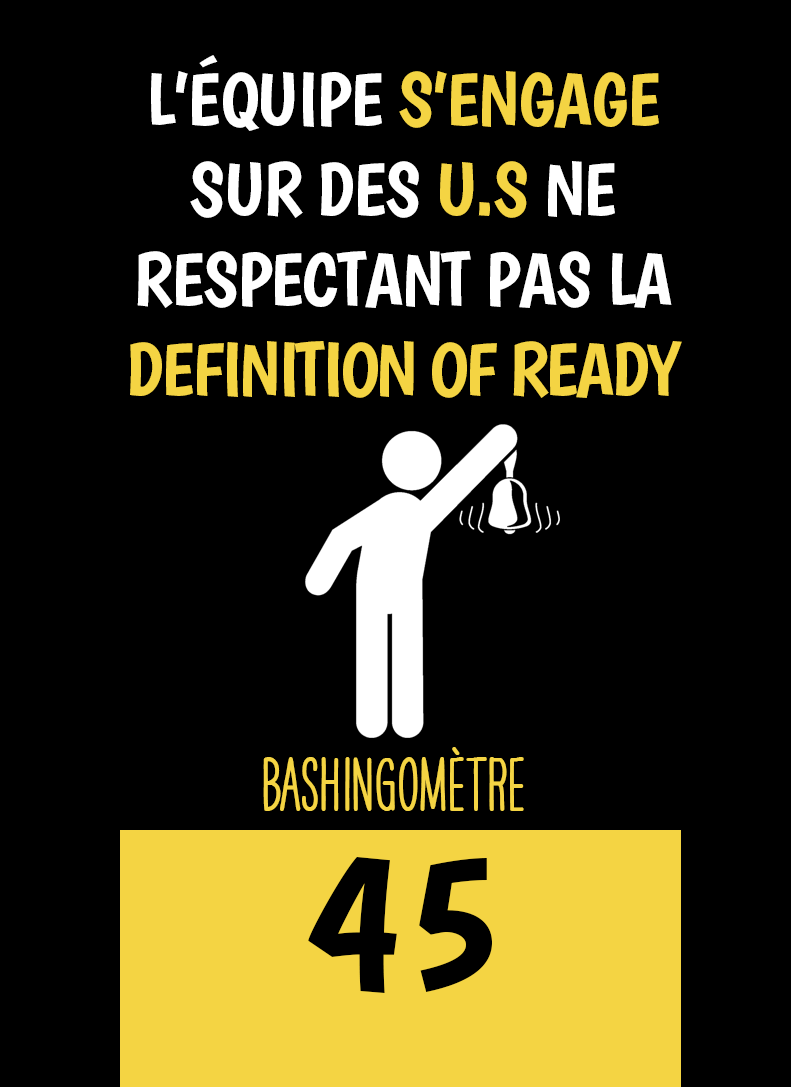
<style>
.page{position:relative;width:791px;height:1087px;background:#000000}
.page>*{position:absolute;margin:0}
.t1{font:75px "Boogaloo-Regular";letter-spacing:-0.02em;color:#ffffff}
.t2{font:75px "Boogaloo-Regular";letter-spacing:-0.02em;color:#f4d443}
.t3{font:75px "Boogaloo-Regular";letter-spacing:-0.04em;color:#f4d443}
.t4{font:66.7px "HAVEANICEDAYTallW04-Bold";color:#f4d443}
.t5{font:200px "Boogaloo-Regular";color:#000000}
</style>
<div class="page">
<p class="t1" style="left:130px;top:55px;width:552px;height:343px;text-align:center">L’ÉQUIPE <span class="t2">S’ENGAGE<br></span>SUR DES <span class="t2">U.S</span> NE RESPECTANT PAS LA<br><span class="t3">DEFINITION OF READY</span></p>
<p class="t4" style="left:263px;top:747px;width:261px;height:64px">BASHINgomètre</p>
<p class="t5" style="left:308px;top:857px;width:184px;height:136px">45</p>
</div>
